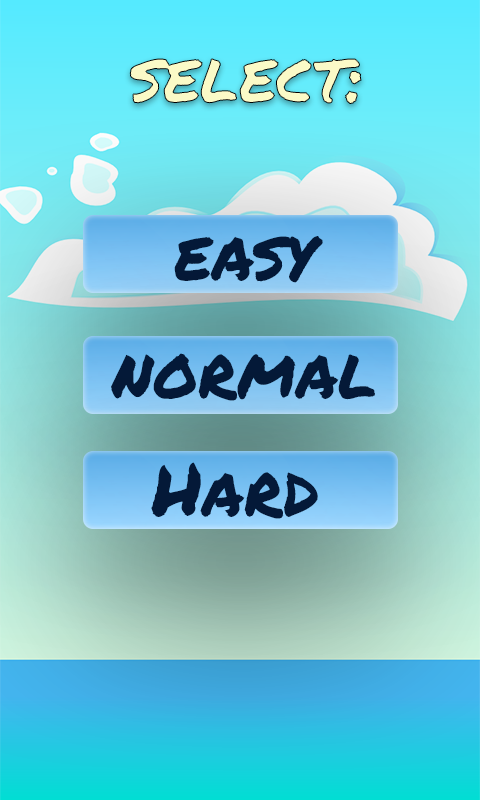
<style>
.page{position:relative;width:480px;height:800px}
.page>*{position:absolute;margin:0}
.t1{font:72.2px "PermanentMarker";color:#fbfac7}
.t2{font:72.2px "PermanentMarker";color:#041938}
.t3{font:72.2px "PermanentMarker";color:#041937}
</style>
<div class="page">
<p class="t1" style="left:129px;top:58px;width:233px;height:46px">select:</p>
<p class="t2" style="left:174px;top:236px;width:149px;height:47px">easy</p>
<p class="t3" style="left:111px;top:353px;width:264px;height:48px">normal</p>
<p class="t2" style="left:151px;top:462px;width:167px;height:57px">Hard</p>
</div>
